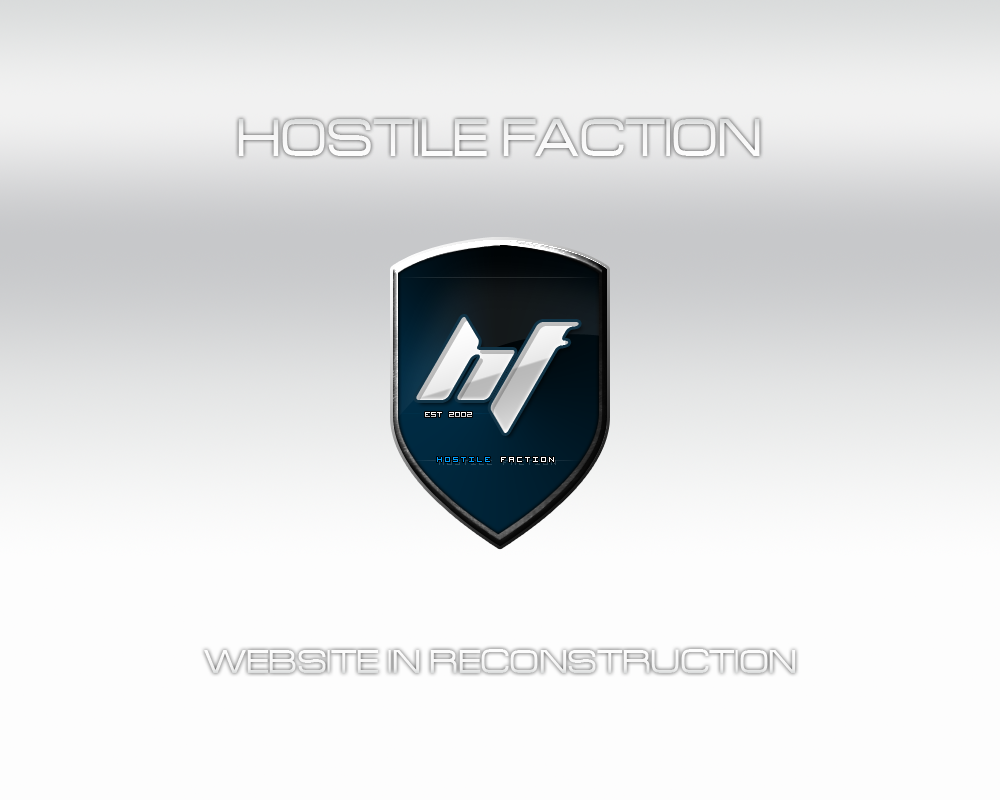
<style>
.page{position:relative;width:1000px;height:800px;background:#fdfdfd}
.page>*{position:absolute;margin:0}
.t1{font:58px "Acens";color:#f6f6f6}
.t2{font:37px "Acens";color:#f8f7f7}
</style>
<div class="page">
<p class="t1" style="left:238px;top:119px;width:522px;height:37px">HOSTILE FACTION</p>
<p class="t2" style="left:204px;top:649px;width:592px;height:24px">WEBSITE IN RECONSTRUCTION</p>
</div>
